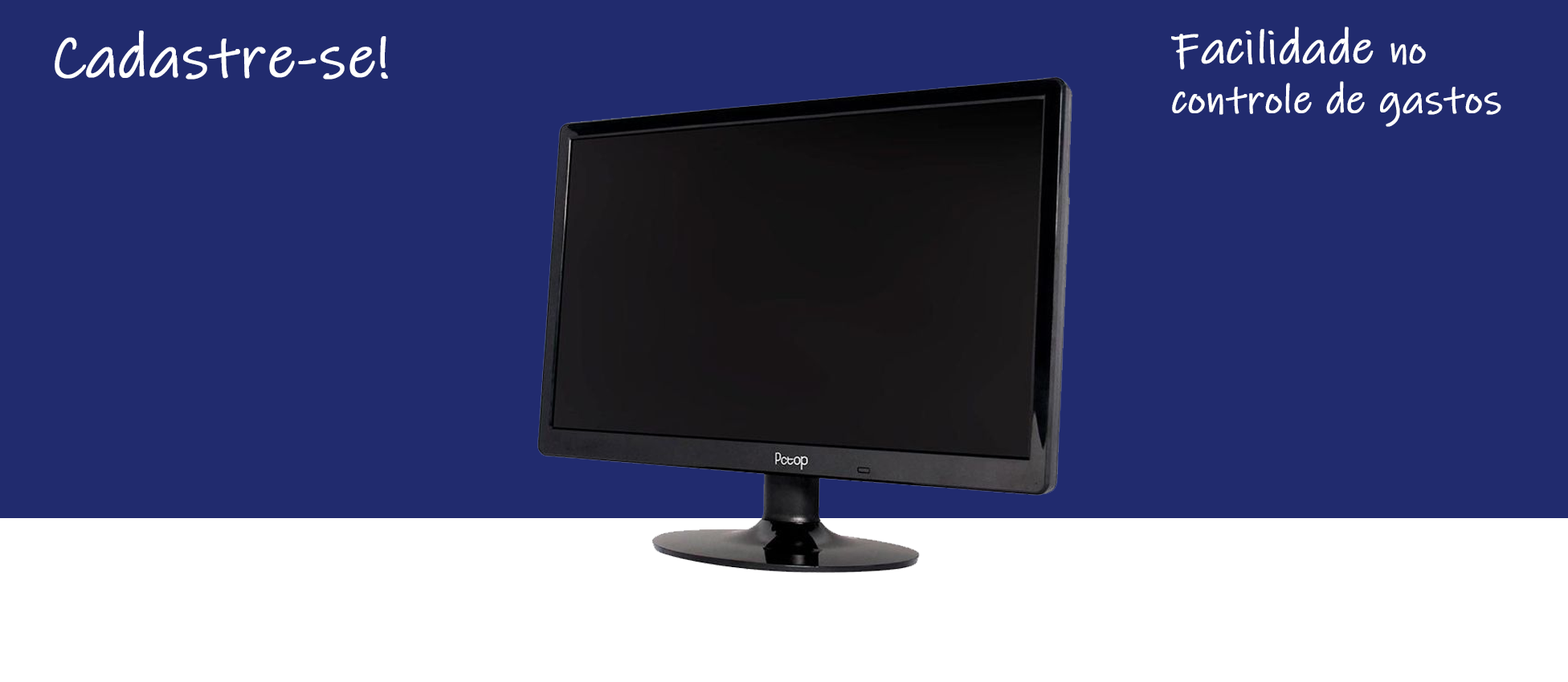
<style>
.page{position:relative;width:1568px;height:682px;background:#212b6e}
.page>*{position:absolute;margin:0}
.t1{font:41px "InkFree";color:#ffffff;font-weight:bold}
.t2{font:47.1px "InkFree";color:#ffffff;font-weight:bold}
.t3{font:60.5px "InkFree";color:#ffffff;font-weight:bold}
</style>
<div class="page">
<p class="t1" style="left:1171px;top:27px;width:330px;height:100px"><span class="t2">Facilidade </span>no<br>controle de gastos</p>
<p class="t3" style="left:55px;top:31px;width:333px;height:49px">Cadastre-se!</p>
</div>
